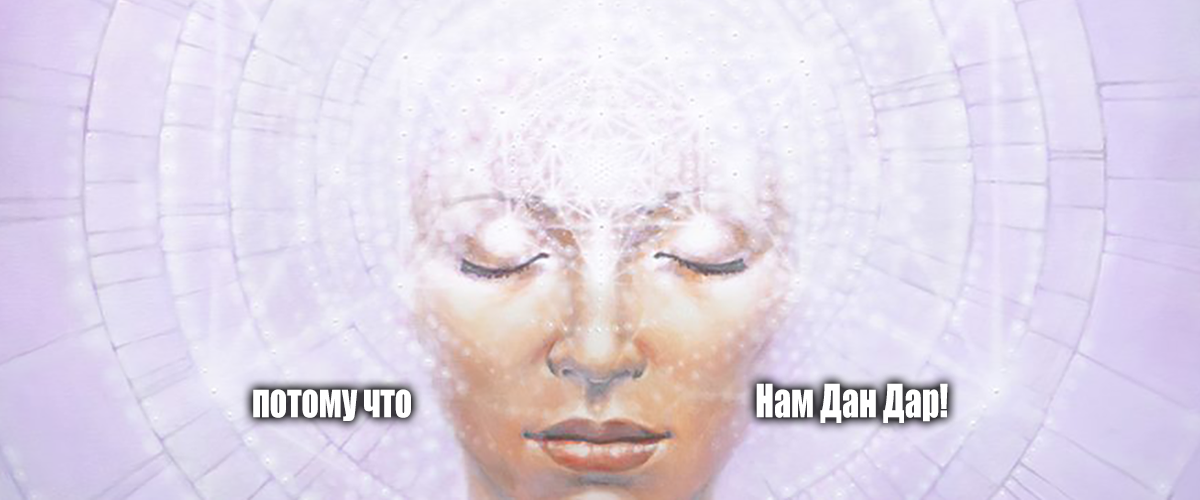
<style>
.page{position:relative;width:1200px;height:500px}
.page>*{position:absolute;margin:0}
.t1{font:42.2px "Impact";color:#ffffff;scale:0.8 1}
</style>
<div class="page">
<p class="t1" style="left:253px;top:389px;width:158px;height:32px">потому что</p>
<p class="t1" style="left:756px;top:383px;width:192px;height:40px">Нам Дан Дар!</p>
</div>
